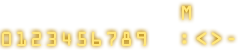
<style>
.page{position:relative;width:238px;height:52px;background:#ffffff}
.page>*{position:absolute;margin:0}
.t1{font:18px "OCRAStd";letter-spacing:0.025em;color:#ffe67a}
</style>
<div class="page">
<p class="t1" style="left:182px;top:5px;width:9px;height:15px">M</p>
<p class="t1" style="left:2px;top:31px;width:9px;height:15px">0</p>
<p class="t1" style="left:17px;top:31px;width:9px;height:15px">1</p>
<p class="t1" style="left:32px;top:31px;width:9px;height:15px">2</p>
<p class="t1" style="left:47px;top:31px;width:9px;height:15px">3</p>
<p class="t1" style="left:62px;top:31px;width:9px;height:15px">4</p>
<p class="t1" style="left:77px;top:31px;width:9px;height:15px">5</p>
<p class="t1" style="left:92px;top:31px;width:9px;height:15px">6</p>
<p class="t1" style="left:107px;top:31px;width:9px;height:15px">7</p>
<p class="t1" style="left:122px;top:31px;width:9px;height:15px">8</p>
<p class="t1" style="left:137px;top:31px;width:9px;height:15px">9</p>
<p class="t1" style="left:182px;top:34px;width:5px;height:10px">:</p>
<p class="t1" style="left:196px;top:32px;width:11px;height:13px">&lt;</p>
<p class="t1" style="left:211px;top:32px;width:11px;height:13px">&gt;</p>
<p class="t1" style="left:228px;top:37px;width:7px;height:4px">-</p>
</div>
